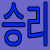
<style>
.page{position:relative;width:50px;height:50px;background:#6d67ca}
.page>*{position:absolute;margin:0}
.t1{font:50px "DotumChe";color:#002aff;scale:0.5 1}
</style>
<div class="page">
<p class="t1" style="left:2px;top:2px;width:45px;height:44px">승리</p>
</div>
